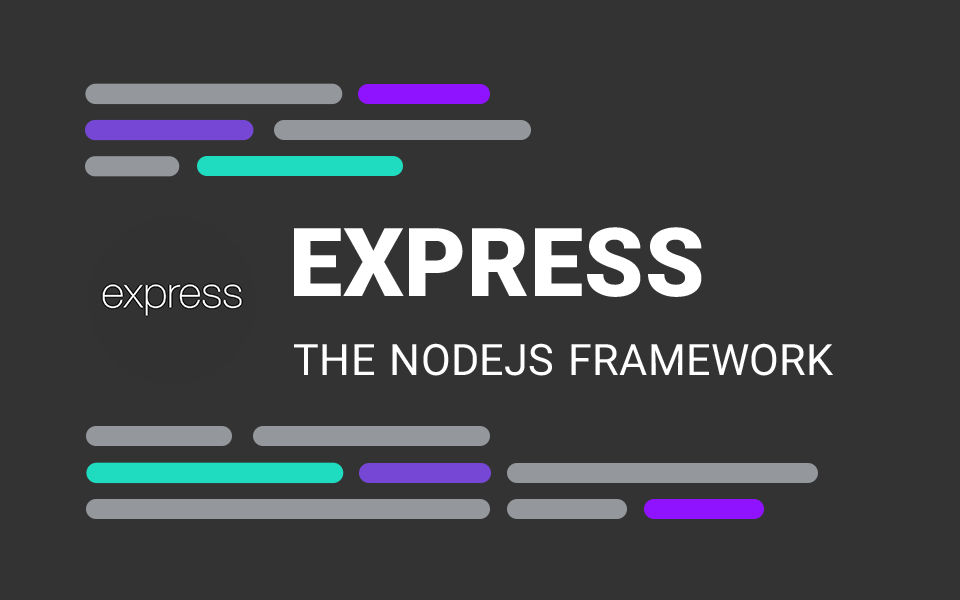
<style>
.page{position:relative;width:960px;height:600px;background:#333333}
.page>*{position:absolute;margin:0}
.t1{font:95.2px "IRANYekan-ExtraBold";letter-spacing:0.009em;color:#ffffff}
.t2{font:43.1px "IRANYekan";letter-spacing:0.009em;color:#ffffff}
</style>
<div class="page">
<p class="t1" style="left:294px;top:227px;width:408px;height:70px">EXPRESS</p>
<p class="t2" style="left:294px;top:343px;width:539px;height:33px">THE NODEJS FRAMEWORK</p>
</div>
